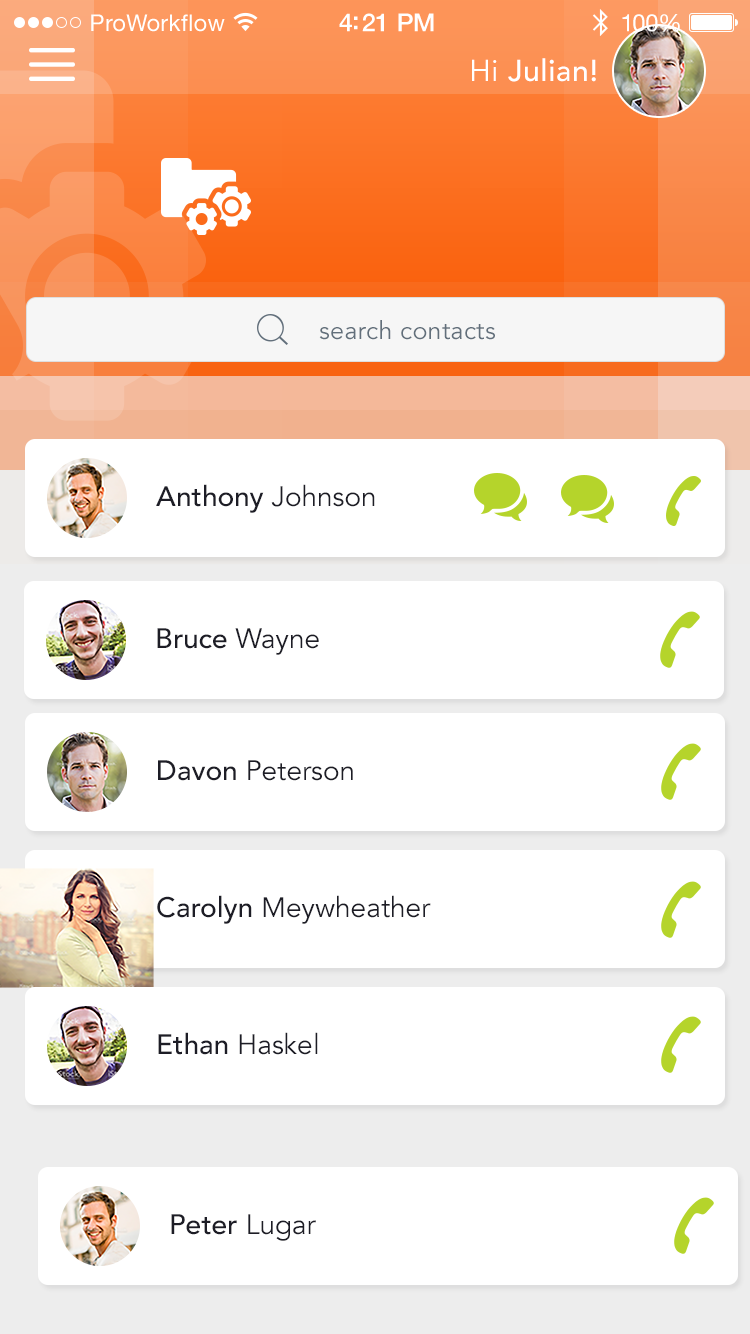
<style>
.page{position:relative;width:750px;height:1334px;background:#ffffff}
.page>*{position:absolute;margin:0}
.t1{font:23px "HelveticaNeue";letter-spacing:0.02em;color:#ffffff}
.t2{font:25px "HelveticaNeue-Medium";letter-spacing:-0.02em;color:#ffffff}
.t3{font:24px "HelveticaNeue";letter-spacing:-0.02em;color:#ffffff}
.t4{font:30px "Avenir-Medium";letter-spacing:0.02em;color:#ffffff}
.t5{font:30px "Avenir-Book";letter-spacing:0.02em;color:#ffffff}
.t6{font:25px "Avenir-Book";letter-spacing:0.015em;color:#626f7b}
.t7{font:28px "Avenir-Medium";color:#1d1d26}
.t8{font:28px "Avenir-Book";color:#1d1d26}
</style>
<div class="page">
<p class="t1" style="left:91px;top:14px;width:134px;height:18px">ProWorkflow</p>
<p class="t2" style="left:339px;top:13px;width:95px;height:19px">4:21 PM</p>
<p class="t3" style="left:622px;top:14px;width:58px;height:18px">100%</p>
<p class="t4" style="left:472px;top:58px;width:124px;height:24px"><span class="t5">Hi </span>Julian!</p>
<p class="t6" style="left:319px;top:320px;width:176px;height:20px">search contacts</p>
<p class="t7" style="left:156px;top:484px;width:219px;height:29px">Anthony <span class="t8">Johnson</span></p>
<p class="t7" style="left:157px;top:628px;width:162px;height:27px">Bruce <span class="t8">Wayne</span></p>
<p class="t8" style="left:158px;top:760px;width:195px;height:21px"><span class="t7">Davon </span>Peterson</p>
<p class="t8" style="left:157px;top:895px;width:274px;height:29px"><span class="t7">Carolyn </span>Meywheather</p>
<p class="t8" style="left:158px;top:1032px;width:160px;height:23px"><span class="t7">Ethan </span>Haskel</p>
<p class="t7" style="left:171px;top:1214px;width:145px;height:27px">Peter <span class="t8">Lugar</span></p>
</div>
